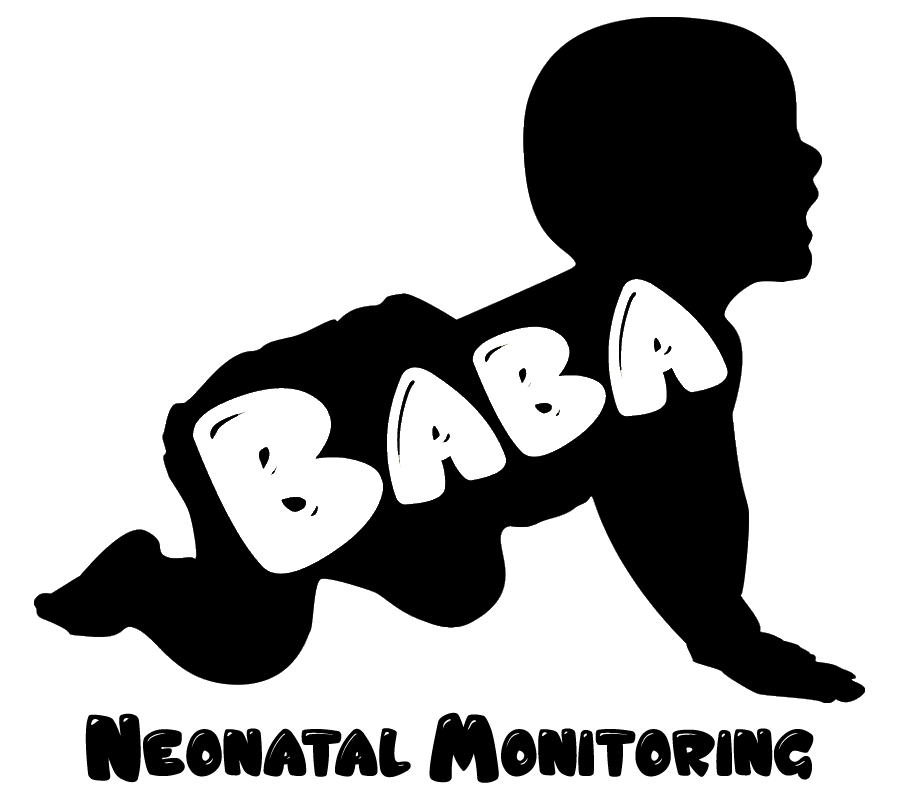
<style>
.page{position:relative;width:900px;height:800px;background:#ffffff}
.page>*{position:absolute;margin:0}
.t1{font:40px/24px "JellyCrazies";color:#000000;font-variant:small-caps;font-weight:bold}
</style>
<div class="page">
<p class="t1" style="left:85px;top:712px;width:729px;height:71px;text-align:center">Neonatal Monitoring</p>
</div>
